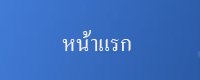
<style>
.page{position:relative;width:200px;height:80px}
.page>*{position:absolute;margin:0}
.t1{font:30px "AngsanaNew";color:#f0f0f7}
</style>
<div class="page">
<p class="t1" style="left:62px;top:30px;width:69px;height:21px">หน้าแรก</p>
</div>
